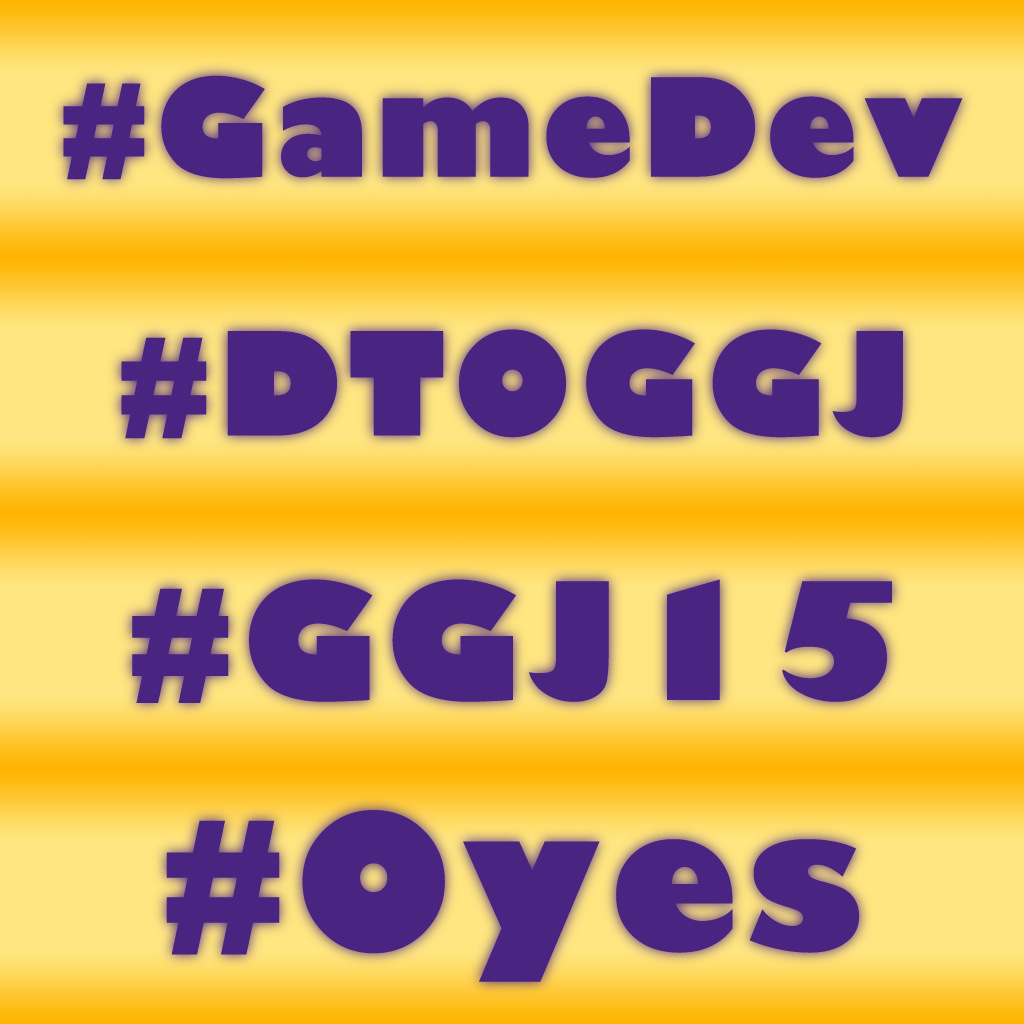
<style>
.page{position:relative;width:1024px;height:1024px}
.page>*{position:absolute;margin:0}
.t1{font:133px "GillSans-UltraBold";letter-spacing:0.05em;color:#492481}
.t2{font:139.8px "GillSans-UltraBold";letter-spacing:0.05em;color:#492481}
.t3{font:158.8px "GillSans-UltraBold";letter-spacing:0.05em;color:#492481}
.t4{font:186px "GillSans-UltraBold";letter-spacing:0.05em;color:#492481}
</style>
<div class="page">
<p class="t1" style="left:63px;top:75px;width:900px;height:105px">#GameDev</p>
<p class="t2" style="left:121px;top:329px;width:782px;height:110px">#DTOGGJ</p>
<p class="t3" style="left:132px;top:579px;width:760px;height:124px">#GGJ15</p>
<p class="t4" style="left:166px;top:810px;width:694px;height:172px">#Oyes</p>
</div>
